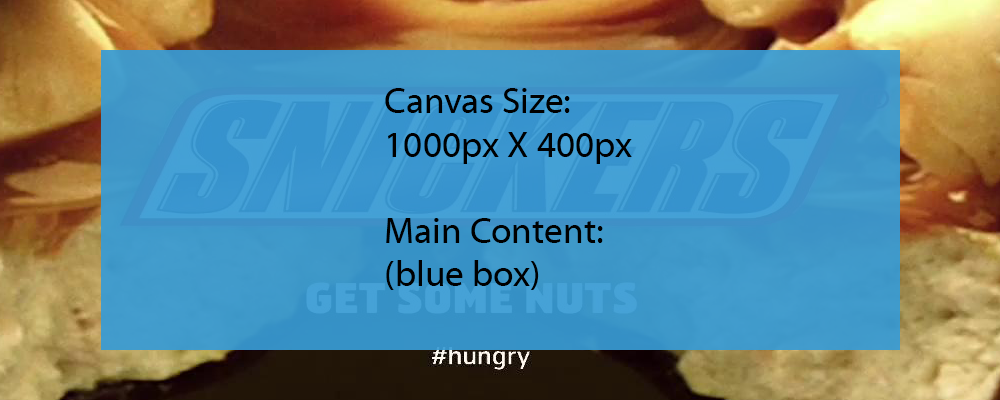
<style>
.page{position:relative;width:1000px;height:400px}
.page>*{position:absolute;margin:0}
.t1{font:36px "MyriadWebPro";color:#000000}
</style>
<div class="page">
<p class="t1" style="left:385px;top:88px;width:247px;height:202px">Canvas Size:<br>1000px X 400px<br><br>Main Content:<br>(blue box)</p>
</div>
